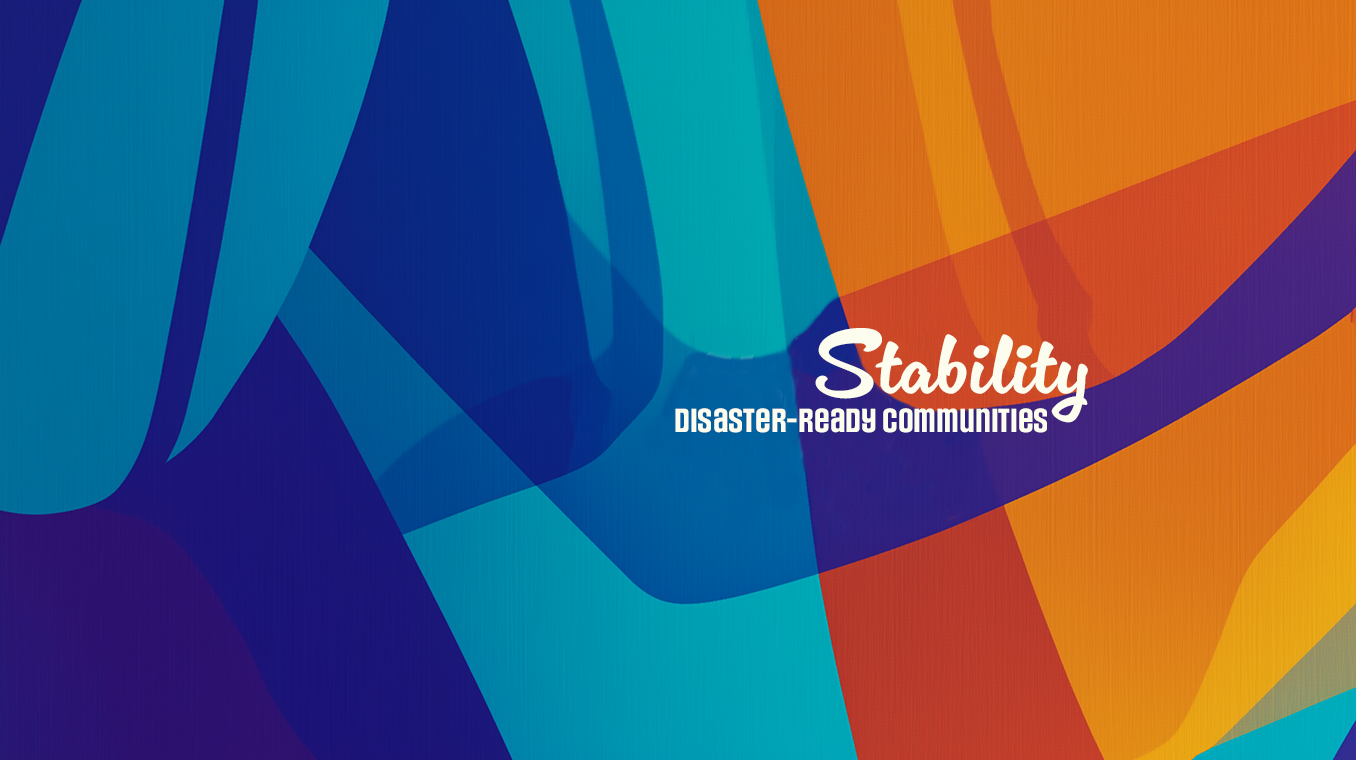
<style>
.page{position:relative;width:1356px;height:760px}
.page>*{position:absolute;margin:0}
.t1{font:95px "CinemaScript";color:#fcfcef}
.t2{font:28.1px "SocialGothic-Bold";color:#fcfcef}
</style>
<div class="page">
<p class="t1" style="left:815px;top:328px;width:273px;height:95px">Stability</p>
<p class="t2" style="left:675px;top:408px;width:372px;height:25px">Disaster-Ready Communities</p>
</div>
